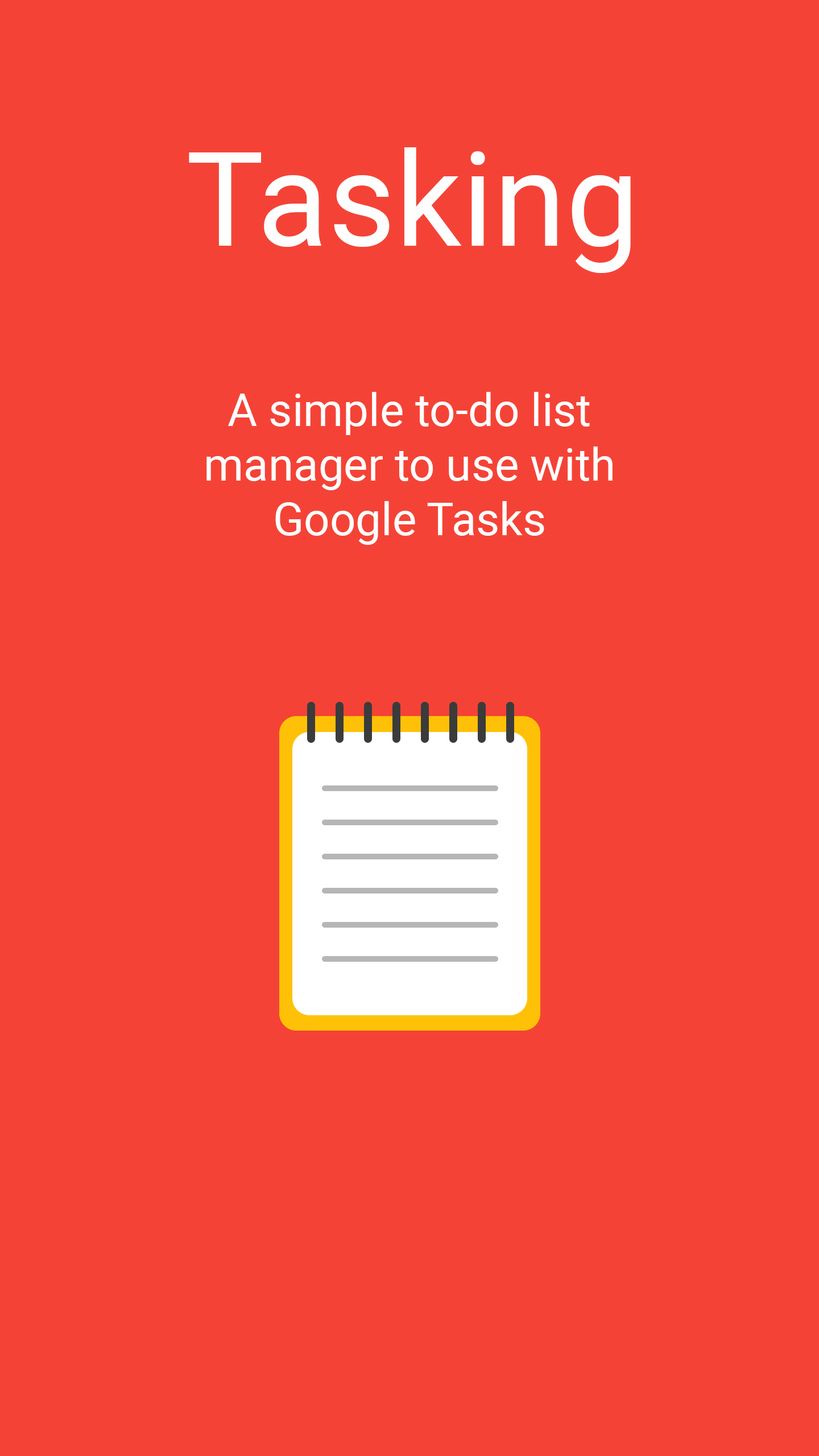
<style>
.page{position:relative;width:819px;height:1456px;background:#f44336}
.page>*{position:absolute;margin:0}
.t1{font:130.8px "Roboto-Regular";color:#fefefe}
.t2{font:45.5px "Roboto-Regular";color:#fefefe}
</style>
<div class="page">
<p class="t1" style="left:189px;top:147px;width:442px;height:126px">Tasking</p>
<p class="t2" style="left:206px;top:392px;width:407px;height:153px;text-align:center">A simple to-do list manager to use with Google Tasks</p>
</div>
